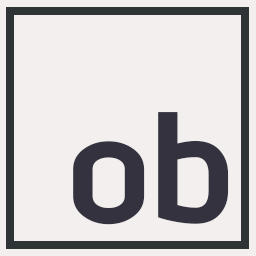
<style>
.page{position:relative;width:256px;height:256px;background:#f2efee}
.page>*{position:absolute;margin:0}
.t1{font:157px "Brokman-Bold";color:#33323e}
</style>
<div class="page">
<p class="t1" style="left:73px;top:112px;width:156px;height:113px">ob</p>
</div>
